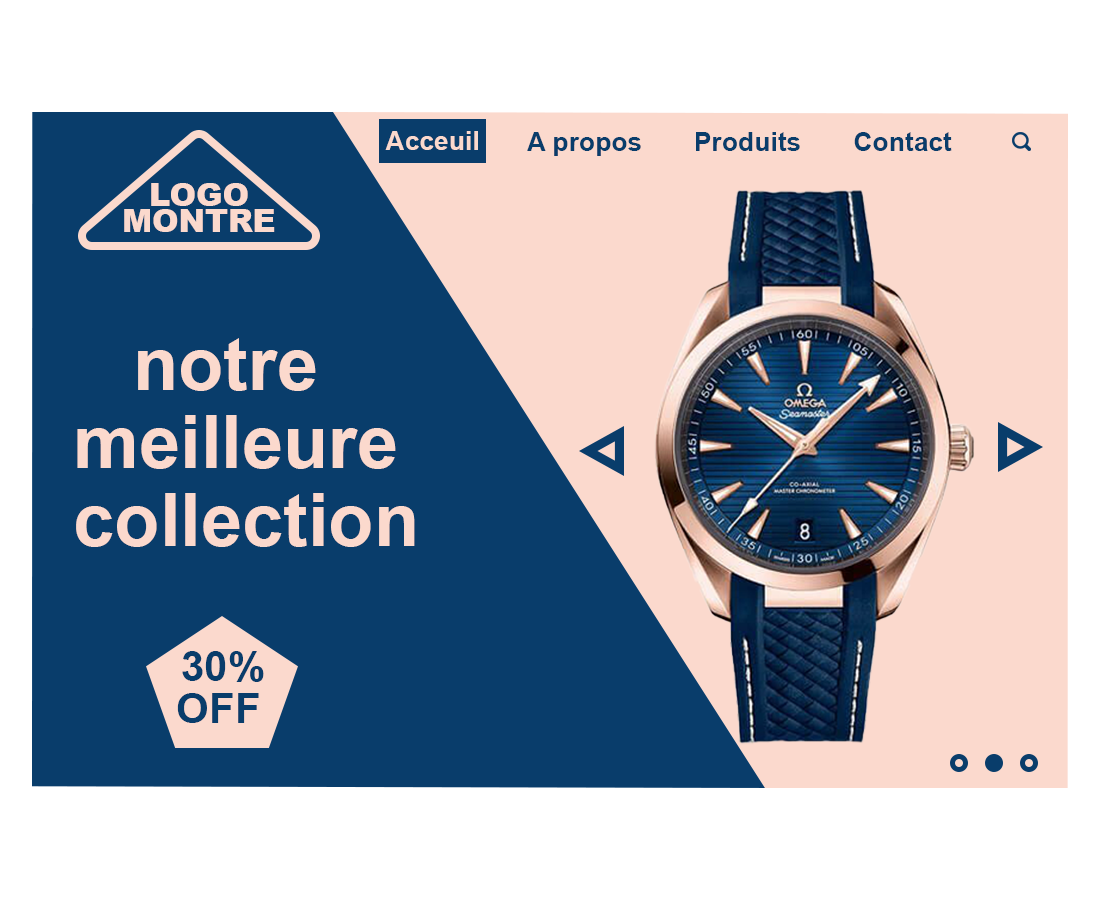
<style>
.page{position:relative;width:1100px;height:900px;background:#093d6b}
.page>*{position:absolute;margin:0}
.t1{font:26.5px "Arial-BoldMT";color:#fbd9cd}
.t2{font:26.5px "Arial-BoldMT";color:#093d6b}
.t3{font:31.8px/26px "Arial-Black";color:#fbd9cd}
.t4{font:74.1px/26px "Arial-BoldMT";color:#fbd9cd}
.t5{font:42.3px "Arial-BoldMT";color:#093d6b}
</style>
<div class="page">
<p class="t1" style="left:385px;top:131px;width:93px;height:19px">Acceuil</p>
<p class="t2" style="left:527px;top:132px;width:114px;height:24px">A propos</p>
<p class="t2" style="left:696px;top:132px;width:104px;height:19px">Produits</p>
<p class="t2" style="left:854px;top:132px;width:98px;height:19px">Contact</p>
<p class="t3" style="left:124px;top:183px;width:151px;height:49px;text-align:center">LOGO<br>MONTRE</p>
<p class="t4" style="left:76px;top:338px;width:339px;height:209px;text-align:center">notre <br><br><br>meilleure<br><br><br> collection</p>
<p class="t5" style="left:182px;top:651px;width:82px;height:31px">30%</p>
<p class="t5" style="left:177px;top:693px;width:82px;height:30px">OFF</p>
</div>
